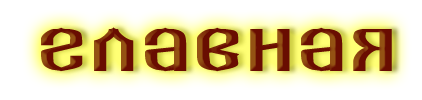
<style>
.page{position:relative;width:422px;height:100px;background:#ffffff}
.page>*{position:absolute;margin:0}
.t1{font:58.3px "ALaRuss";color:#690d01;font-weight:bold;scale:2.18 1}
</style>
<div class="page">
<p class="t1" style="left:41px;top:27px;width:351px;height:45px">главная</p>
</div>
